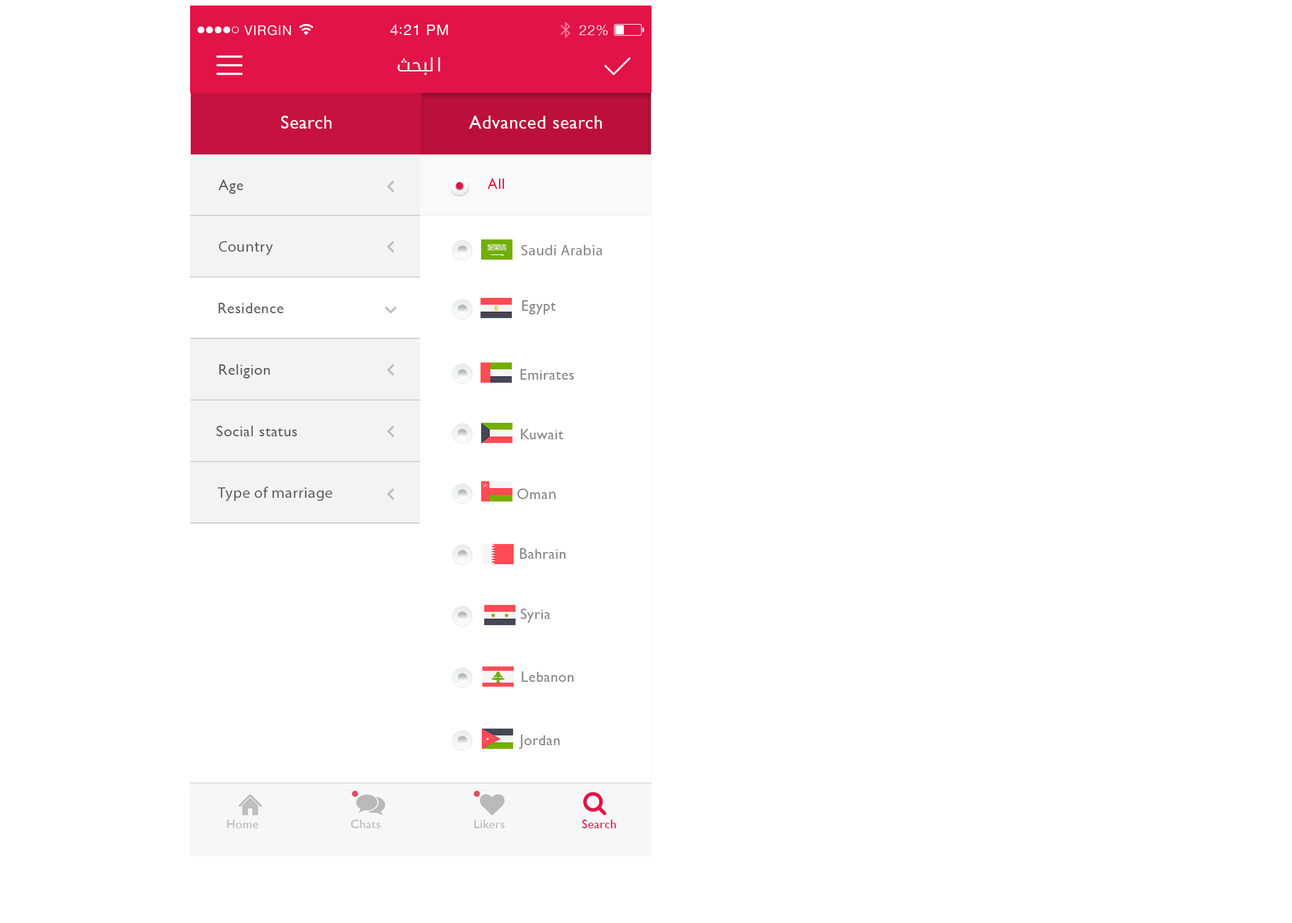
<style>
.page{position:relative;width:1292px;height:923px;background:#ffffff}
.page>*{position:absolute;margin:0}
.t1{font:18.5px "DroidArabicKufi";letter-spacing:0.029em;color:#ffffff}
.t2{font:18.5px "GillSans";letter-spacing:0.029em;color:#ffffff}
.t3{font:15.4px "GillSans";letter-spacing:0.029em;color:#5f5f5f}
.t4{font:14.8px "MyriadPro-Regular";letter-spacing:0.029em;color:#e21347}
.t5{font:14.8px "GillSans";letter-spacing:0.029em;color:#e21347}
.t6{font:15.4px "MyriadPro-Regular";letter-spacing:0.029em;color:#5f5f5f}
.t7{font:14.8px "MyriadPro-Regular";letter-spacing:0.029em;color:#898989}
.t8{font:14.8px "GillSans";letter-spacing:0.029em;color:#898989}
.t9{font:12.3px "GillSans";letter-spacing:0.029em;color:#b9b9b9}
.t10{font:12.3px "GillSans";letter-spacing:0.029em;color:#e21347}
</style>
<div class="page">
<p class="t1" style="left:397px;top:57px;width:44px;height:18px">البحث</p>
<p class="t2" style="left:281px;top:116px;width:51px;height:13px">Search</p>
<p class="t2" style="left:469px;top:116px;width:133px;height:13px">Advanced search</p>
<p class="t3" style="left:218px;top:180px;width:26px;height:14px">Age</p>
<p class="t4" style="left:487px;top:178px;width:18px;height:11px"><span class="t5">A</span>ll</p>
<p class="t6" style="left:219px;top:241px;width:54px;height:14px">Country</p>
<p class="t7" style="left:521px;top:245px;width:81px;height:10px">Saudi Arabia</p>
<p class="t3" style="left:218px;top:303px;width:66px;height:10px">Residence</p>
<p class="t8" style="left:522px;top:300px;width:34px;height:14px">Egypt</p>
<p class="t3" style="left:219px;top:364px;width:51px;height:14px">Religion</p>
<p class="t8" style="left:521px;top:369px;width:53px;height:11px">Emirates</p>
<p class="t3" style="left:217px;top:426px;width:80px;height:10px">Social status</p>
<p class="t8" style="left:521px;top:429px;width:43px;height:10px">Kuwait</p>
<p class="t6" style="left:218px;top:487px;width:114px;height:14px">Type of marriage</p>
<p class="t8" style="left:517px;top:489px;width:39px;height:10px">Oma<span class="t7">n</span></p>
<p class="t8" style="left:520px;top:548px;width:46px;height:11px">Bahrain</p>
<p class="t8" style="left:521px;top:608px;width:30px;height:15px">Syria</p>
<p class="t8" style="left:522px;top:671px;width:52px;height:11px">Lebanon</p>
<p class="t8" style="left:519px;top:735px;width:41px;height:14px">Jordan</p>
<p class="t9" style="left:227px;top:820px;width:31px;height:8px">Home</p>
<p class="t9" style="left:351px;top:820px;width:30px;height:8px">Chats</p>
<p class="t9" style="left:474px;top:820px;width:31px;height:8px">Likers</p>
<p class="t10" style="left:582px;top:820px;width:34px;height:8px">Search</p>
</div>
